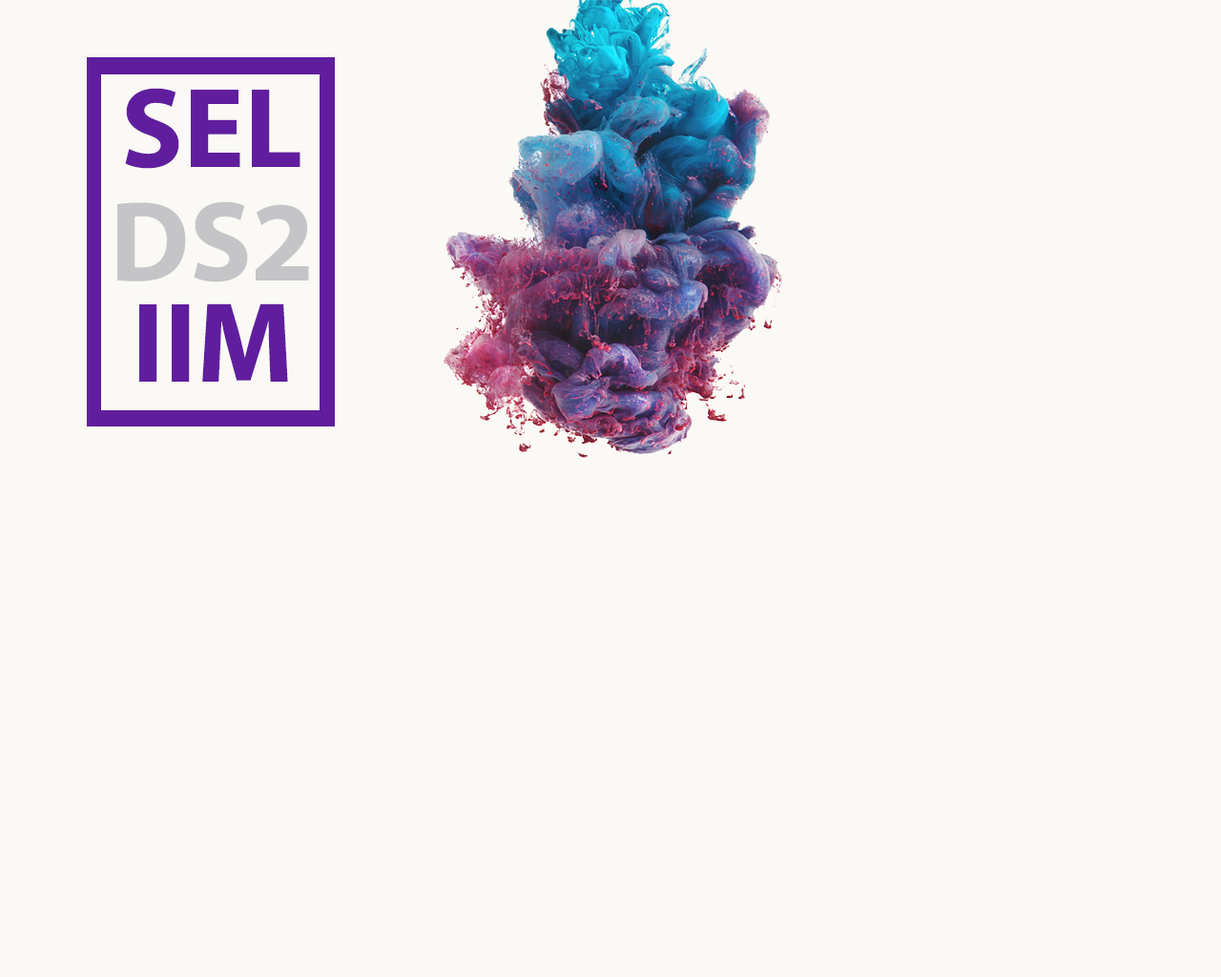
<style>
.page{position:relative;width:1221px;height:977px;background:#faf9f5}
.page>*{position:absolute;margin:0}
.t1{font:114.5px "MyriadPro-Bold";color:#601e9e}
.t2{font:114.5px "MyriadPro-Bold";color:#c5c4c6}
</style>
<div class="page">
<p class="t1" style="left:125px;top:88px;width:175px;height:81px">SEL</p>
<p class="t2" style="left:117px;top:201px;width:192px;height:81px">DS2</p>
<p class="t1" style="left:139px;top:303px;width:149px;height:79px">IIM</p>
</div>
